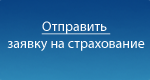
<style>
.page{position:relative;width:150px;height:80px}
.page>*{position:absolute;margin:0}
.t1{font:14px "MyriadPro-Regular";color:#ffffff}
.t2{font:14px "MyriadPro-Regular";color:#ffffff;text-decoration:underline}
</style>
<div class="page">
<p class="t1" style="left:7px;top:21px;width:138px;height:30px;text-align:center"><span class="t2">Отправить <br></span>заявку на страхование</p>
</div>
